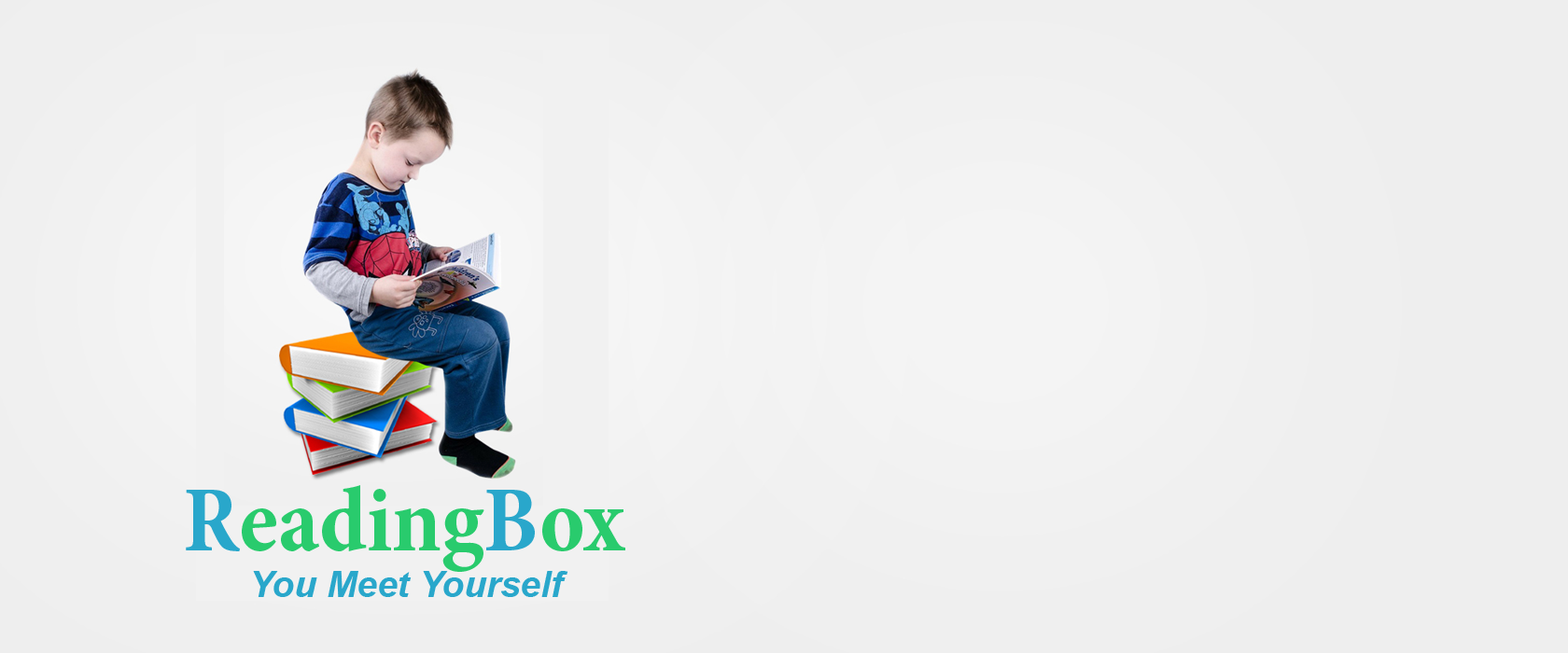
<style>
.page{position:relative;width:1568px;height:653px}
.page>*{position:absolute;margin:0}
.t1{font:93.3px "MinionPro-BoldCn";color:#29cb6d}
.t2{font:93.3px "MinionPro-BoldCn";color:#29a7cb}
.t3{font:36.3px "Arial-BoldItalicMT";color:#29a7cb}
</style>
<div class="page">
<p class="t1" style="left:186px;top:485px;width:439px;height:87px"><span class="t2">R</span>eading<span class="t2">B</span>ox</p>
<p class="t3" style="left:253px;top:571px;width:315px;height:26px">You Meet Yourself</p>
</div>
